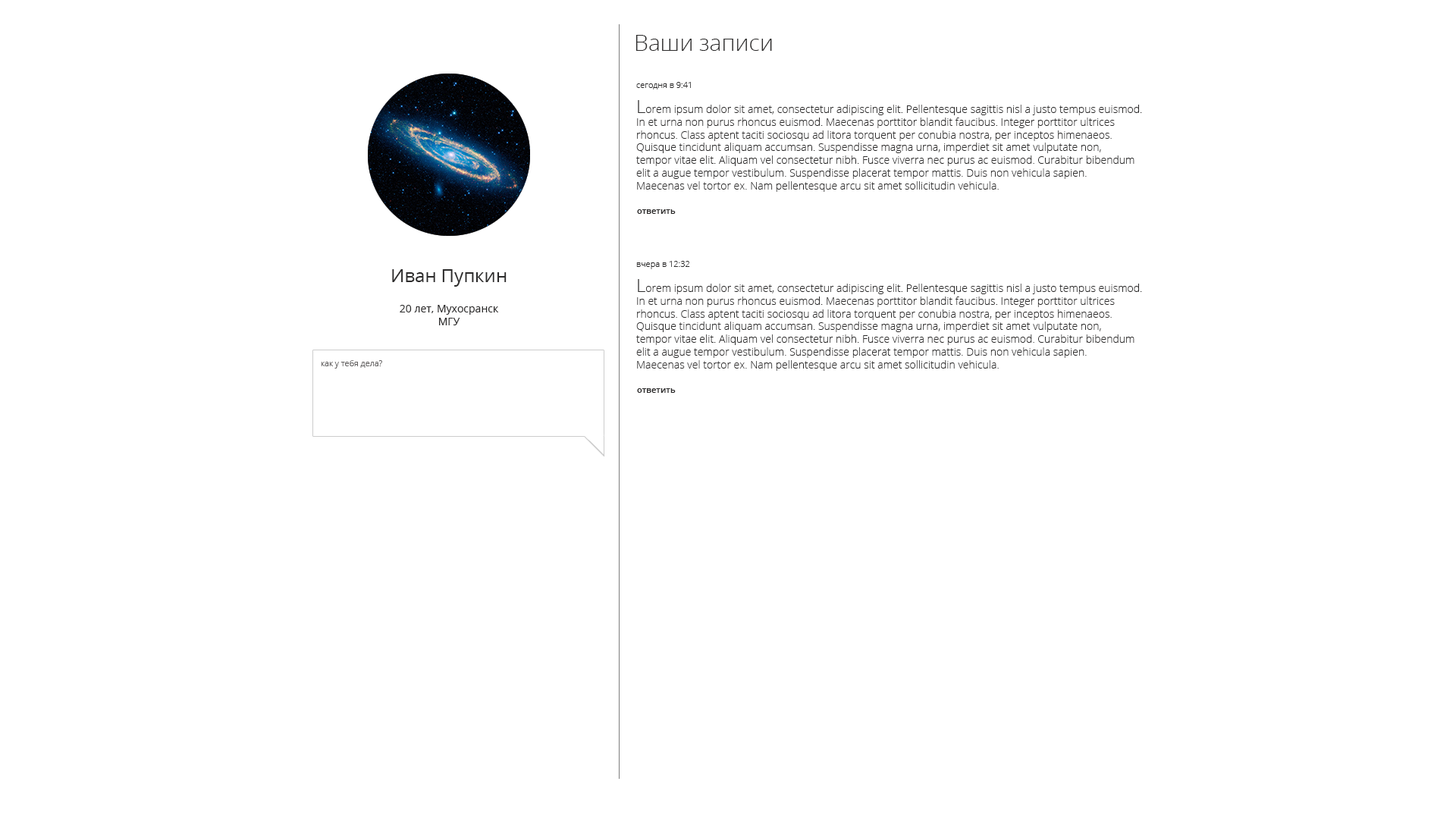
<style>
.page{position:relative;width:1456px;height:819px;background:#ffffff}
.page>*{position:absolute;margin:0}
.t1{font:22.7px "OpenSans-Light";color:#2c2b2b}
.t2{font:8.3px "OpenSans-Light";color:#2c2b2b}
.t3{font:10.6px "OpenSans-Light";color:#2c2b2b}
.t4{font:18.2px "OpenSans-Light";color:#2c2b2b}
.t5{font:8.3px "OpenSans-Semibold";color:#2c2b2b}
.t6{font:18.2px "OpenSans";color:#2c2b2b}
.t7{font:10.6px "OpenSans";color:#2c2b2b}
</style>
<div class="page">
<p class="t1" style="left:635px;top:35px;width:137px;height:16px">Ваши записи</p>
<p class="t2" style="left:636px;top:82px;width:55px;height:7px">сегодня в 9:41</p>
<p class="t3" style="left:636px;top:100px;width:506px;height:92px"><span class="t4">L</span>orem ipsum dolor sit amet, consectetur adipiscing elit. Pellentesque sagittis nisl a justo tempus euismod. <br>In et urna non purus rhoncus euismod. Maecenas porttitor blandit faucibus. Integer porttitor ultrices<br>rhoncus. Class aptent taciti sociosqu ad litora torquent per conubia nostra, per inceptos himenaeos. <br>Quisque tincidunt aliquam accumsan. Suspendisse magna urna, imperdiet sit amet vulputate non, <br>tempor vitae elit. Aliquam vel consectetur nibh. Fusce viverra nec purus ac euismod. Curabitur bibendum <br>elit a augue tempor vestibulum. Suspendisse placerat tempor mattis. Duis non vehicula sapien. <br>Maecenas vel tortor ex. Nam pellentesque arcu sit amet sollicitudin vehicula.</p>
<p class="t5" style="left:637px;top:209px;width:39px;height:5px">ответить</p>
<p class="t6" style="left:392px;top:269px;width:115px;height:18px">Иван Пупкин</p>
<p class="t2" style="left:636px;top:261px;width:54px;height:8px">вчера в 12:32</p>
<p class="t3" style="left:636px;top:279px;width:506px;height:92px"><span class="t4">L</span>orem ipsum dolor sit amet, consectetur adipiscing elit. Pellentesque sagittis nisl a justo tempus euismod. <br>In et urna non purus rhoncus euismod. Maecenas porttitor blandit faucibus. Integer porttitor ultrices<br>rhoncus. Class aptent taciti sociosqu ad litora torquent per conubia nostra, per inceptos himenaeos. <br>Quisque tincidunt aliquam accumsan. Suspendisse magna urna, imperdiet sit amet vulputate non, <br>tempor vitae elit. Aliquam vel consectetur nibh. Fusce viverra nec purus ac euismod. Curabitur bibendum <br>elit a augue tempor vestibulum. Suspendisse placerat tempor mattis. Duis non vehicula sapien. <br>Maecenas vel tortor ex. Nam pellentesque arcu sit amet sollicitudin vehicula.</p>
<p class="t7" style="left:400px;top:305px;width:99px;height:20px;text-align:center">20 лет, Мухосранск<br>МГУ</p>
<p class="t5" style="left:637px;top:388px;width:39px;height:5px">ответить</p>
</div>
